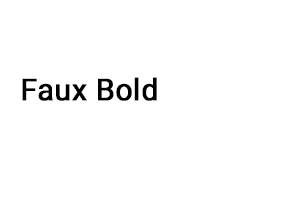
<style>
.page{position:relative;width:300px;height:200px;background:#ffffff}
.page>*{position:absolute;margin:0}
.t1{font:30px "Roboto-Regular";color:#000000;font-weight:bold}
</style>
<div class="page">
<p class="t1" style="left:22px;top:77px;width:135px;height:24px">Faux Bold</p>
</div>
